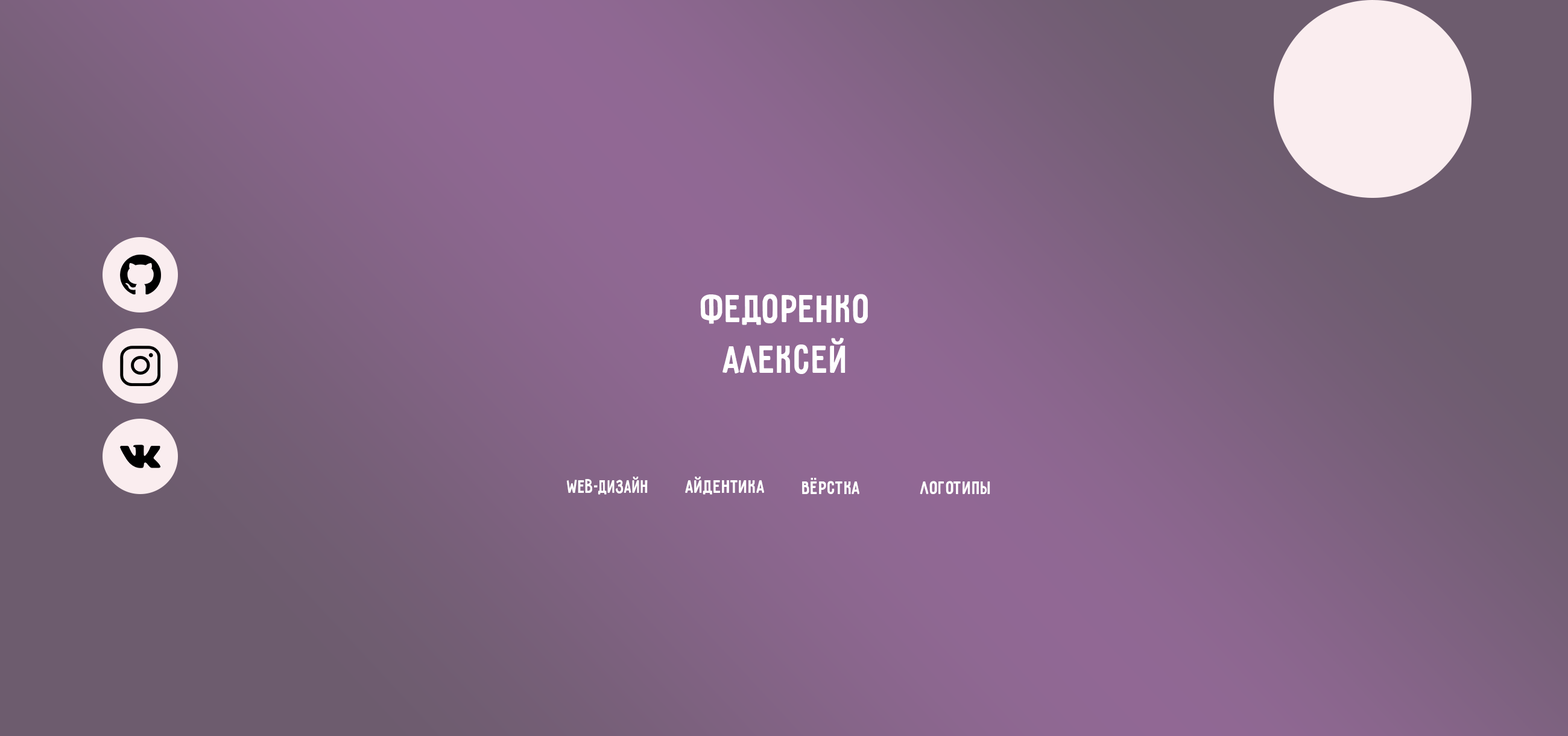
<style>
.page{position:relative;width:1568px;height:736px}
.page>*{position:absolute;margin:0}
.t1{font:42.2px "Pribambas-Regular";color:#ffffff}
.t2{font:20.2px "Pribambas-Regular";color:#ffffff;scale:0.9 1}
.t3{font:20.2px "Pribambas-Regular";color:#ffffff}
</style>
<div class="page">
<p class="t1" style="left:700px;top:294px;width:168px;height:80px;text-align:center">Федоренко<br>Алексей</p>
<p class="t2" style="left:566px;top:476px;width:82px;height:19px">Web-дизайн</p>
<p class="t3" style="left:685px;top:476px;width:79px;height:19px">Айдентика</p>
<p class="t3" style="left:802px;top:478px;width:57px;height:16px">Вёрстка</p>
<p class="t3" style="left:920px;top:481px;width:70px;height:13px">Логотипы</p>
</div>
